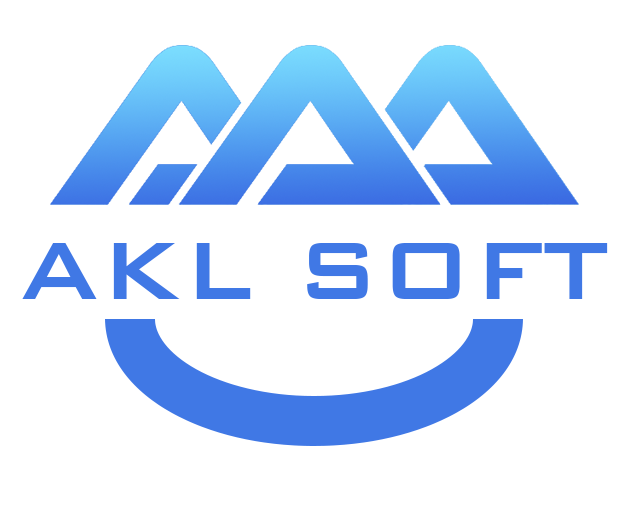
<style>
.page{position:relative;width:628px;height:511px;background:#ffffff}
.page>*{position:absolute;margin:0}
.t1{font:108.3px "BankGothicBT-Medium";color:#4078e5;scale:0.97 1}
</style>
<div class="page">
<p class="t1" style="left:22px;top:243px;width:586px;height:56px">AKL SOFT</p>
</div>
